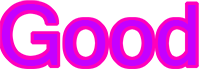
<style>
.page{position:relative;width:200px;height:69px;background:#ffffff}
.page>*{position:absolute;margin:0}
.t1{font:83.9px "MicrosoftSansSerif";color:#c400ff}
</style>
<div class="page">
<p class="t1" style="left:1px;top:4px;width:195px;height:62px">Good</p>
</div>
